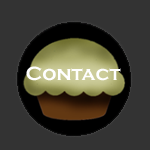
<style>
.page{position:relative;width:150px;height:150px;background:#333333}
.page>*{position:absolute;margin:0}
.t1{font:20px "CopperplateGothic-Bold";color:#ffffff}
</style>
<div class="page">
<p class="t1" style="left:26px;top:66px;width:95px;height:15px">Contact</p>
</div>
